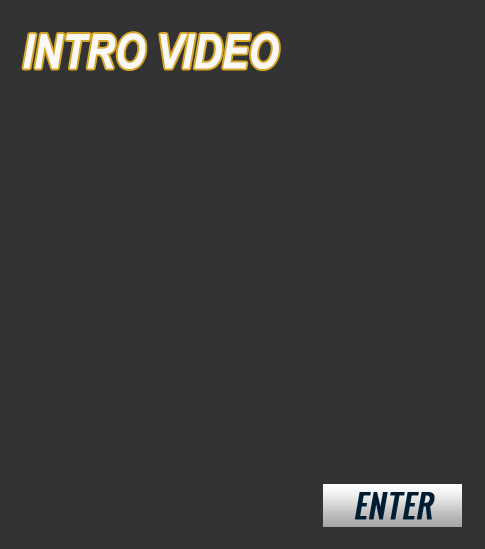
<style>
.page{position:relative;width:485px;height:549px;background:#333333}
.page>*{position:absolute;margin:0}
.t1{font:48px "ArialNarrow-BoldItalic";color:#fbf8f8}
</style>
<div class="page">
<p class="t1" style="left:23px;top:33px;width:256px;height:36px">INTRO VIDEO</p>
</div>
